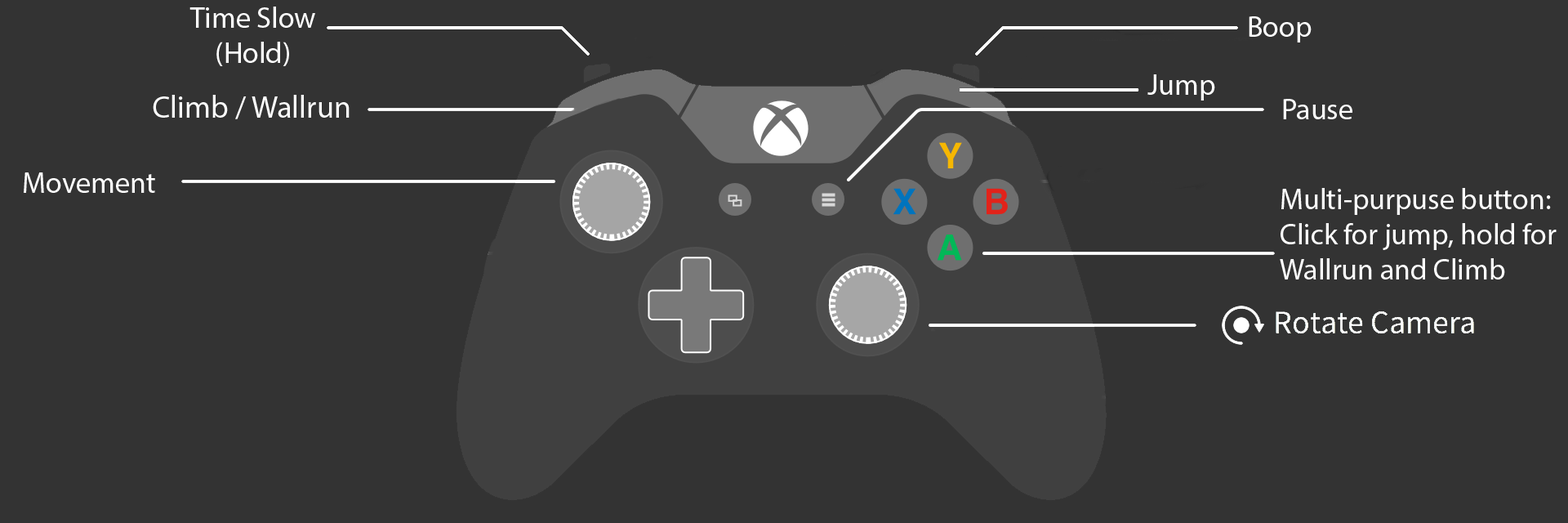
<style>
.page{position:relative;width:1568px;height:523px;background:#333333}
.page>*{position:absolute;margin:0}
.t1{font:29.4px "MyriadPro-Regular";color:#ffffff}
.t2{font:31.3px "MyriadPro-Regular";color:#ffffff}
</style>
<div class="page">
<p class="t1" style="left:189px;top:7px;width:126px;height:59px;text-align:center">Time Slow<br>(Hold)</p>
<p class="t1" style="left:1249px;top:16px;width:63px;height:26px">Boop</p>
<p class="t1" style="left:1147px;top:74px;width:68px;height:26px">Jump</p>
<p class="t2" style="left:153px;top:95px;width:197px;height:24px">Climb / Wallrun</p>
<p class="t1" style="left:1283px;top:99px;width:69px;height:20px">Pause</p>
<p class="t1" style="left:24px;top:172px;width:131px;height:21px">Movement</p>
<p class="t1" style="left:1280px;top:188px;width:277px;height:91px">Multi-purpuse button:<br>Click for jump, hold for<br>Wallrun and Climb</p>
</div>
